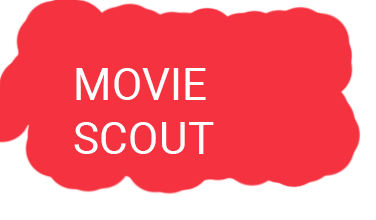
<style>
.page{position:relative;width:376px;height:220px;background:#f53240}
.page>*{position:absolute;margin:0}
.t1{font:44.4px "Roboto-Regular";color:#ffffff}
</style>
<div class="page">
<p class="t1" style="left:74px;top:68px;width:140px;height:86px">MOVIE<br>SCOUT</p>
</div>
